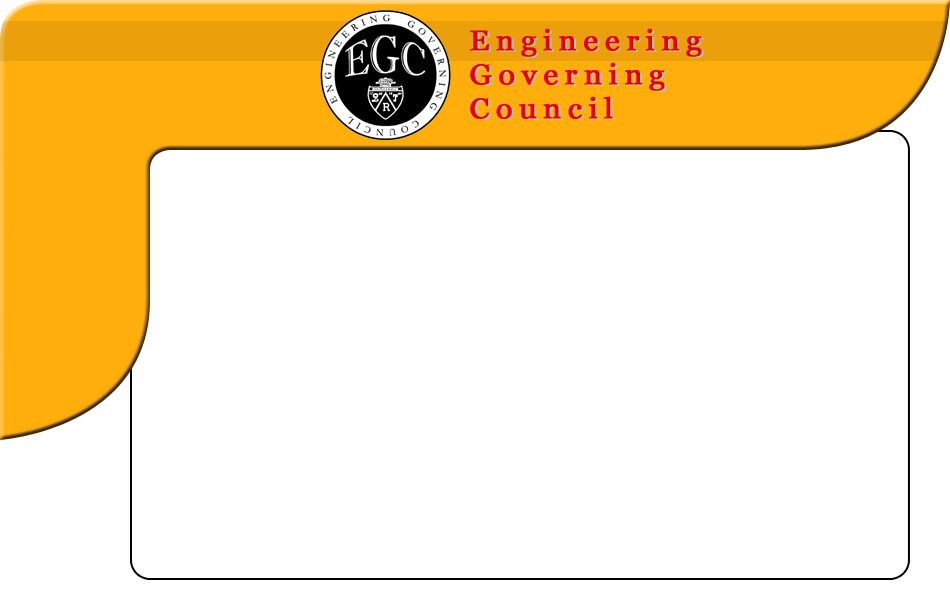
<style>
.page{position:relative;width:950px;height:600px;background:#ffffff}
.page>*{position:absolute;margin:0}
.t1{font:28.3px "Georgia";letter-spacing:0.2em;color:#e70000;font-weight:bold;scale:1.07 1}
.t2{font:28.3px "Georgia";letter-spacing:0.2em;font-weight:bold;scale:1.07 1}
</style>
<div class="page">
<p class="t1" style="left:470px;top:28px;width:232px;height:91px">Engineering<br>Governing<br>Council</p>
<p class="t2" style="left:472px;top:29px;width:232px;height:91px">Engineering<br>Governing<br>Council</p>
</div>
